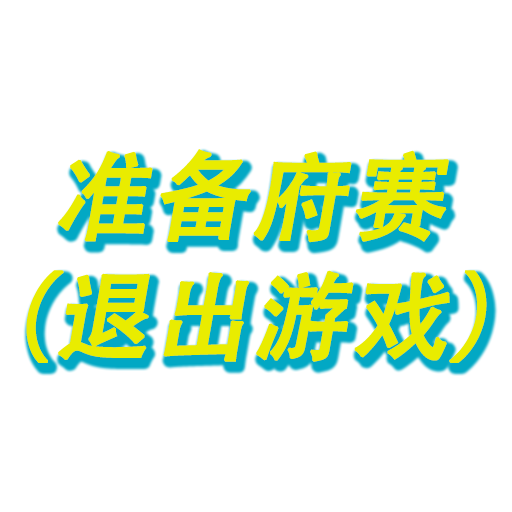
<style>
.page{position:relative;width:512px;height:512px;background:#ffffff}
.page>*{position:absolute;margin:0}
.t1{font:96px/120px "AdobeHeitiStd-Regular";color:#e9ec00;font-weight:bold;font-style:italic}
</style>
<div class="page">
<p class="t1" style="left:26px;top:149px;width:461px;height:214px">准备府赛<br>（退出游戏）</p>
</div>
